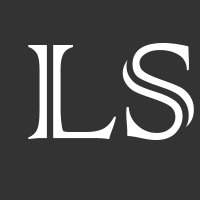
<style>
.page{position:relative;width:200px;height:200px;background:#333333}
.page>*{position:absolute;margin:0}
.t1{font:179.7px "ColonnaMT";color:#ffffff}
</style>
<div class="page">
<p class="t1" style="left:28px;top:43px;width:166px;height:97px">LS</p>
</div>
